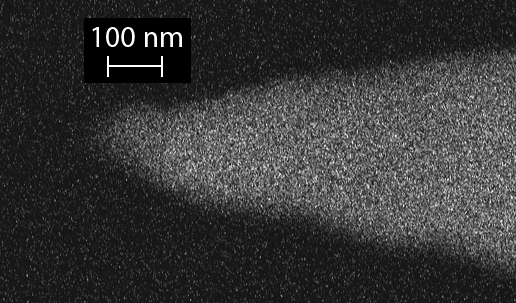
<style>
.page{position:relative;width:516px;height:303px}
.page>*{position:absolute;margin:0}
.t1{font:30px "MyriadPro-Regular";color:#ffffff}
</style>
<div class="page">
<p class="t1" style="left:92px;top:27px;width:90px;height:20px">100 nm</p>
</div>
